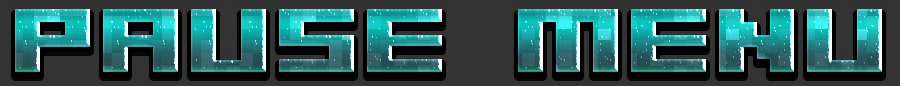
<style>
.page{position:relative;width:900px;height:86px;background:#333333}
.page>*{position:absolute;margin:0}
.t1{font:100px "04b09";text-transform:uppercase}
</style>
<div class="page">
<p class="t1" style="left:15px;top:9px;width:867px;height:63px">PAUSE MENU</p>
</div>
